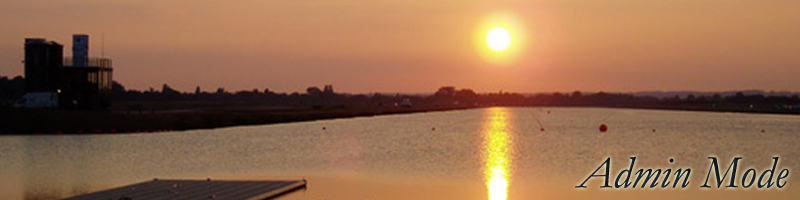
<style>
.page{position:relative;width:800px;height:200px}
.page>*{position:absolute;margin:0}
.t1{font:45.8px "Garamond-Italic";color:#151e2b}
</style>
<div class="page">
<p class="t1" style="left:575px;top:156px;width:214px;height:32px">Admin Mode</p>
</div>
